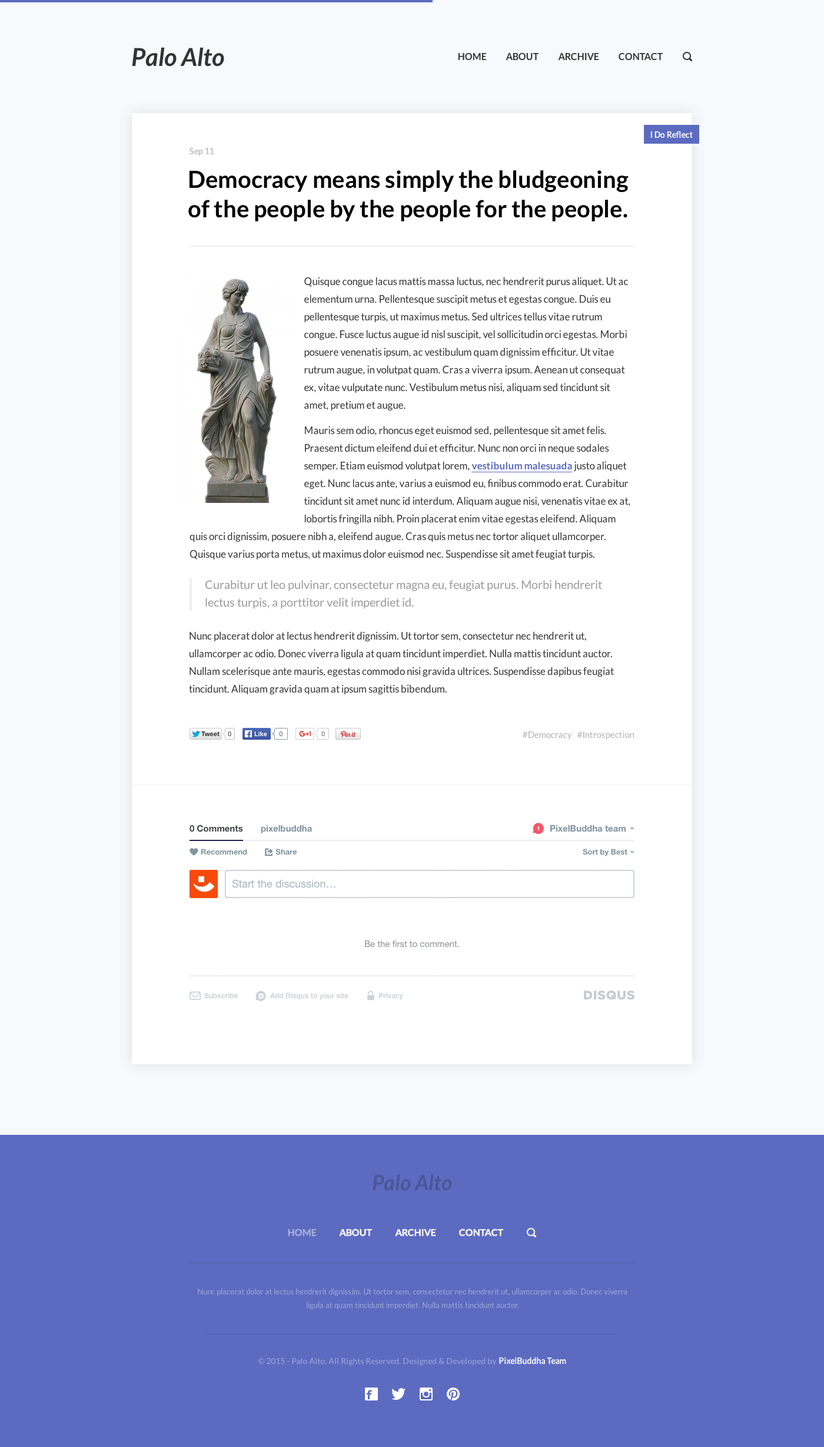
<style>
.page{position:relative;width:824px;height:1447px;background:#ffffff}
.page>*{position:absolute;margin:0}
.t1{font:24.7px "Lato-BoldItalic";color:#333333}
.t2{font:9.4px "Lato-Bold";color:#333333;text-transform:uppercase}
.t3{font:8.2px "Lato-Bold";color:#ffffff}
.t4{font:8.2px "Lato-Bold";color:#bdbdbd}
.t5{font:23.6px/29.4px "Lato-Bold";color:#000000}
.t6{font:10px/17.7px "Lato-Regular";color:#333333}
.t7{font:10px/17.7px "Lato-Bold";color:#5c6bc0}
.t8{font:11.8px/17.7px "Lato-Regular";color:#999999}
.t9{font:8.8px "Lato-Regular";color:#b2b2b2}
.t10{font:8.8px "MyriadPro-Regular";color:#b2b2b2}
.t11{font:21.2px "Lato-BoldItalic";color:#4a569a}
.t12{font:9.4px "Lato-Bold";color:#a9afdb;text-transform:uppercase}
.t13{font:9.4px "Lato-Bold";color:#ffffff;text-transform:uppercase}
.t14{font:7.7px/13.5px "Lato-Regular";color:#9da6d9}
.t15{font:8.2px "Lato-Regular";color:#9da6d9}
</style>
<div class="page">
<p class="t1" style="left:132px;top:47px;width:92px;height:20px">Palo Alto</p>
<p class="t2" style="left:458px;top:52px;width:205px;height:9px">home           about           archive           contact</p>
<p class="t3" style="left:651px;top:131px;width:42px;height:7px">I Do Reflect</p>
<p class="t4" style="left:190px;top:147px;width:24px;height:9px">Sep 11</p>
<p class="t5" style="left:188px;top:170px;width:441px;height:51px">Democracy means simply the bludgeoning of the people by the people for the people.</p>
<p class="t6" style="left:304px;top:277px;width:324px;height:134px">Quisque congue lacus mattis massa luctus, nec hendrerit purus aliquet. Ut ac elementum urna. Pellentesque suscipit metus et egestas congue. Duis eu pellentesque turpis, ut maximus metus. Sed ultrices tellus vitae rutrum congue. Fusce luctus augue id nisl suscipit, vel sollicitudin orci egestas. Morbi posuere venenatis ipsum, ac vestibulum quam dignissim efficitur. Ut vitae rutrum augue, in volutpat quam. Cras a viverra ipsum. Aenean ut consequat ex, vitae vulputate nunc. Vestibulum metus nisi, aliquam sed tincidunt sit amet, pretium et augue.</p>
<p class="t6" style="left:304px;top:426px;width:327px;height:99px">Mauris sem odio, rhoncus eget euismod sed, pellentesque sit amet felis. Praesent dictum eleifend dui et efficitur. Nunc non orci in neque sodales semper. Etiam euismod volutpat lorem, <span class="t7">vestibulum malesuada </span>justo aliquet eget. Nunc lacus ante, varius a euismod eu, finibus commodo erat. Curabitur tincidunt sit amet nunc id interdum. Aliquam augue nisi, venenatis vitae ex at, lobortis fringilla nibh. Proin placerat enim vitae egestas eleifend. Aliquam</p>
<p class="t6" style="left:190px;top:532px;width:416px;height:28px">quis orci dignissim, posuere nibh a, eleifend augue. Cras quis metus nec tortor aliquet ullamcorper. Quisque varius porta metus, ut maximus dolor euismod nec. Suspendisse sit amet feugiat turpis.</p>
<p class="t8" style="left:205px;top:580px;width:397px;height:29px">Curabitur ut leo pulvinar, consectetur magna eu, feugiat purus. Morbi hendrerit lectus turpis, a porttitor velit imperdiet id.</p>
<p class="t6" style="left:189px;top:631px;width:425px;height:64px">Nunc placerat dolor at lectus hendrerit dignissim. Ut tortor sem, consectetur nec hendrerit ut, ullamcorper ac odio. Donec viverra ligula at quam tincidunt imperdiet. Nulla mattis tincidunt auctor. Nullam scelerisque ante mauris, egestas commodo nisi gravida ultrices. Suspendisse dapibus feugiat tincidunt. Aliquam gravida quam at ipsum sagittis bibendum.</p>
<p class="t9" style="left:523px;top:731px;width:112px;height:9px">#Democracy   #<span class="t10">I</span>ntrospection</p>
<p class="t11" style="left:373px;top:1174px;width:79px;height:17px">Palo Alto</p>
<p class="t12" style="left:288px;top:1228px;width:29px;height:8px">home</p>
<p class="t13" style="left:339px;top:1228px;width:164px;height:8px">about             archive             contact</p>
<p class="t14" style="left:198px;top:1288px;width:430px;height:21px;text-align:center">Nunc placerat dolor at lectus hendrerit dignissim. Ut tortor sem, consectetur nec hendrerit ut, ullamcorper ac odio. Donec viverra ligula at quam tincidunt imperdiet. Nulla mattis tincidunt auctor.</p>
<p class="t15" style="left:258px;top:1357px;width:239px;height:8px">© 2015 - Palo Alto. All Rights Reserved. Designed &amp; Developed by</p>
<p class="t3" style="left:499px;top:1357px;width:67px;height:7px">PixelBuddha Team</p>
</div>
